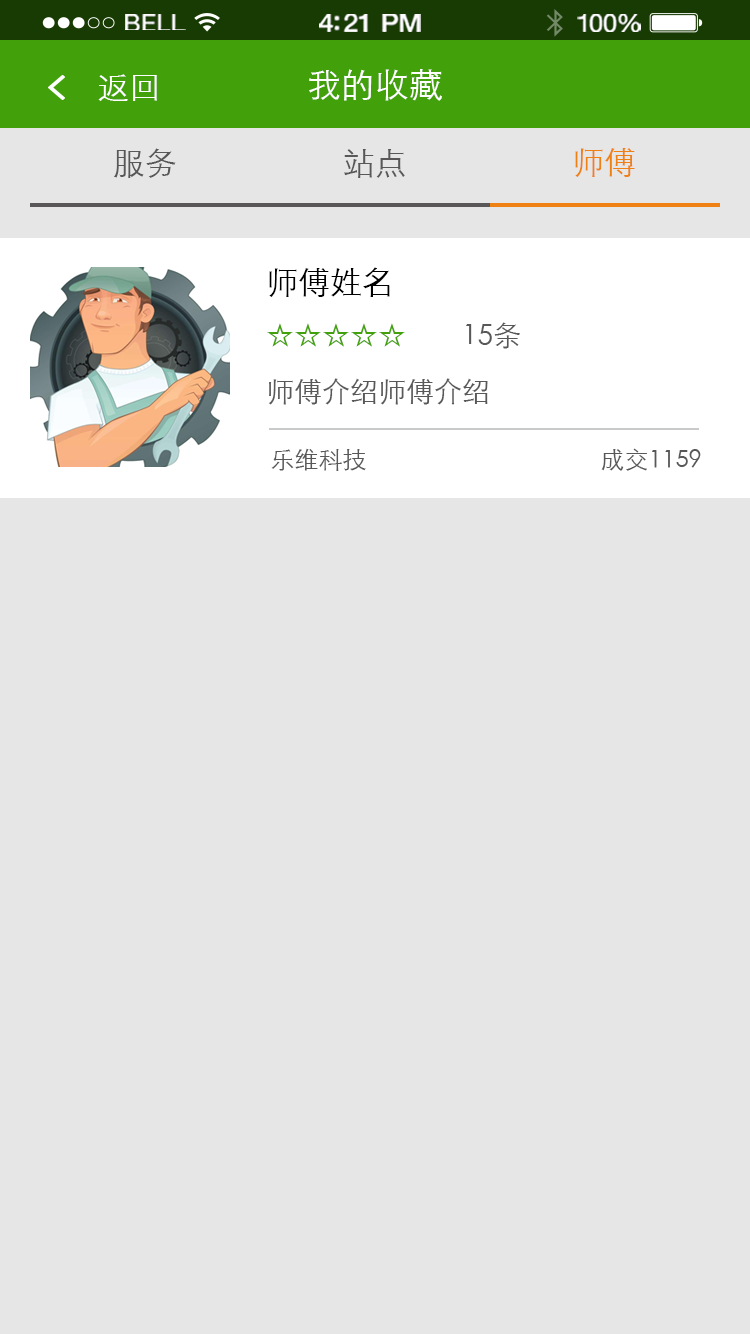
<style>
.page{position:relative;width:750px;height:1334px;background:#e6e6e6}
.page>*{position:absolute;margin:0}
.t1{font:23.3px "HelveticaNeue";letter-spacing:0.02em;color:#ffffff;scale:1.06 1}
.t2{font:25.3px "HelveticaNeue-Medium";letter-spacing:-0.02em;color:#ffffff;scale:1.06 1}
.t3{font:24.3px "HelveticaNeue";letter-spacing:-0.02em;color:#ffffff;scale:1.06 1}
.t4{font:32px "STXihei";color:#ffffff}
.t5{font:34px "STXihei";color:#ffffff}
.t6{font:32px "STXihei";color:#595757}
.t7{font:32px "STXihei";color:#ef8014}
.t8{font:28px/56px "STXihei";color:#595757}
.t9{font:32px/56px "STXihei";color:#000000}
.t10{font:28px/56px "STXihei";color:#42a00a}
.t11{font:24px "STXihei";color:#595757}
</style>
<div class="page">
<p class="t1" style="left:125px;top:14px;width:61px;height:16px">BELL</p>
<p class="t2" style="left:319px;top:14px;width:102px;height:18px">4:21 PM</p>
<p class="t3" style="left:577px;top:14px;width:64px;height:18px">100%</p>
<p class="t4" style="left:98px;top:74px;width:59px;height:27px">返回</p>
<p class="t5" style="left:309px;top:69px;width:133px;height:32px">我的收藏</p>
<p class="t6" style="left:114px;top:148px;width:62px;height:30px">服务</p>
<p class="t6" style="left:344px;top:149px;width:61px;height:29px">站点</p>
<p class="t7" style="left:575px;top:148px;width:60px;height:29px">师傅</p>
<p class="t8" style="left:267px;top:267px;width:253px;height:138px"><span class="t9">师傅姓名<br></span><span class="t10">☆☆☆☆☆</span>        15条<br>师傅介绍师傅介绍</p>
<p class="t11" style="left:271px;top:448px;width:430px;height:23px">乐维科技                                       成交1159</p>
</div>
